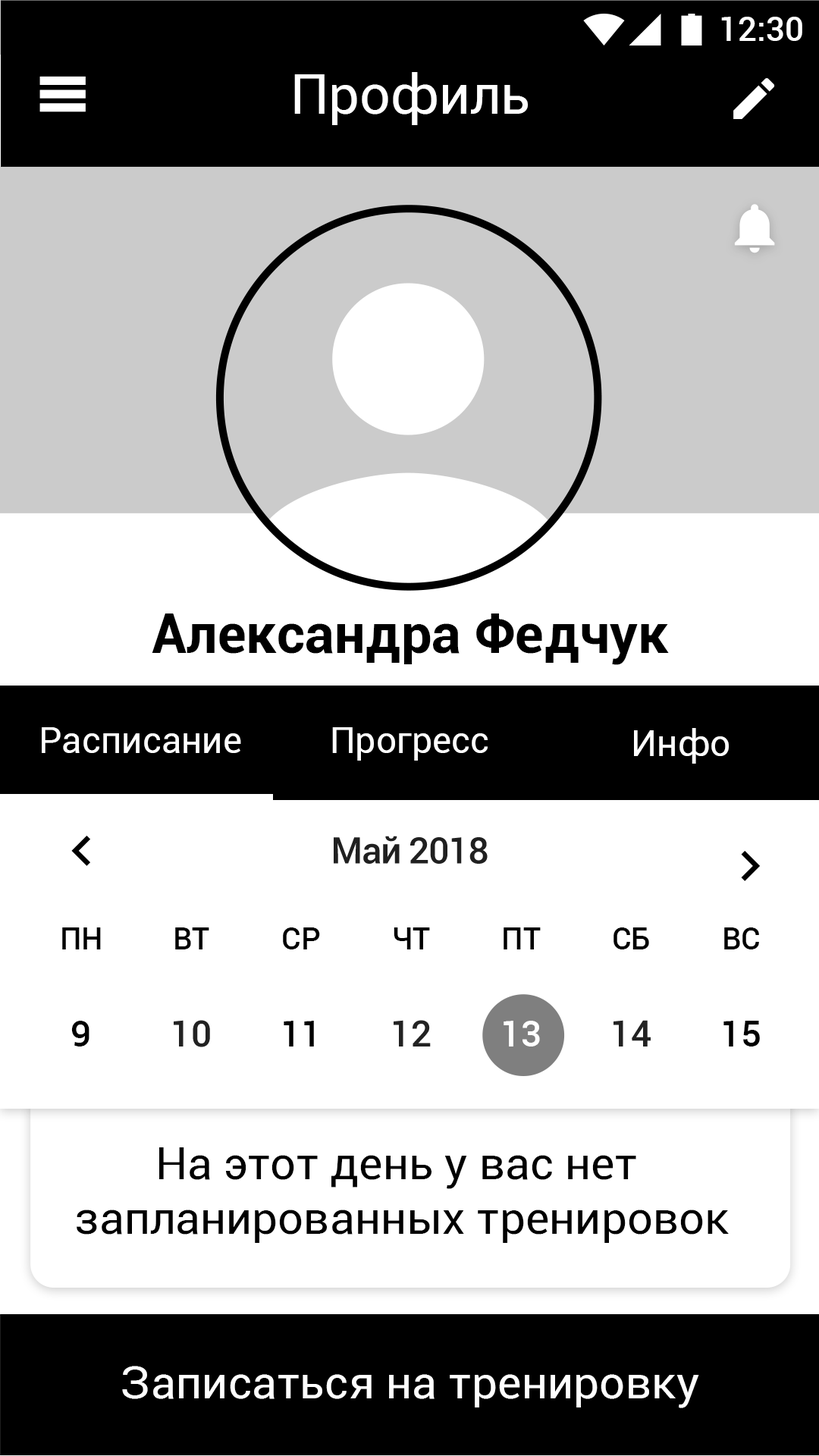
<style>
.page{position:relative;width:819px;height:1456px;background:#ffffff}
.page>*{position:absolute;margin:0}
.t1{font:33.4px "Roboto-Medium";color:#ffffff}
.t2{font:54.6px "Roboto-Regular";color:#ffffff}
.t3{font:54.6px "Roboto-Bold";color:#000000}
.t4{font:36.4px "Roboto-Regular";color:#ffffff}
.t5{font:30.2px "Roboto-Medium";color:#000000}
.t6{font:36.4px "Roboto-Medium";color:#000000}
.t7{font:36.4px "Roboto-Medium";color:#ffffff}
.t8{font:45.5px "Roboto-Regular";color:#000000}
.t9{font:45.5px "Roboto-Regular";color:#ffffff}
</style>
<div class="page">
<p class="t1" style="left:721px;top:17px;width:81px;height:24px">12:30</p>
<p class="t2" style="left:294px;top:72px;width:234px;height:53px">Профиль</p>
<p class="t3" style="left:152px;top:613px;width:517px;height:52px">Александра Федчук</p>
<p class="t4" style="left:42px;top:727px;width:199px;height:26px">Расписание</p>
<p class="t4" style="left:332px;top:727px;width:156px;height:34px">Прогресс</p>
<p class="t4" style="left:634px;top:728px;width:95px;height:36px">Инфо</p>
<p class="t5" style="left:62px;top:927px;width:39px;height:22px">ПН</p>
<p class="t5" style="left:175px;top:927px;width:34px;height:22px">ВТ</p>
<p class="t5" style="left:283px;top:927px;width:37px;height:22px">СР</p>
<p class="t5" style="left:394px;top:927px;width:36px;height:22px">ЧТ</p>
<p class="t5" style="left:504px;top:927px;width:37px;height:22px">ПТ</p>
<p class="t5" style="left:613px;top:927px;width:36px;height:22px">СБ</p>
<p class="t5" style="left:724px;top:927px;width:35px;height:22px">ВС</p>
<p class="t6" style="left:71px;top:1021px;width:18px;height:25px">9</p>
<p class="t6" style="left:284px;top:1021px;width:30px;height:25px">11</p>
<p class="t7" style="left:504px;top:1021px;width:36px;height:25px">13</p>
<p class="t6" style="left:723px;top:1021px;width:37px;height:25px">15</p>
<p class="t8" style="left:77px;top:1147px;width:652px;height:96px;text-align:center">На этот день у вас нет <br>запланированных тренировок</p>
<p class="t9" style="left:122px;top:1366px;width:577px;height:42px">Записаться на тренировку</p>
</div>
